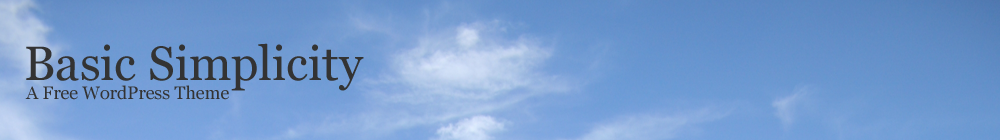
<style>
.page{position:relative;width:1000px;height:140px}
.page>*{position:absolute;margin:0}
.t1{font:48px "Georgia";color:#333333}
.t2{font:18px "Georgia";color:#333333}
</style>
<div class="page">
<p class="t1" style="left:26px;top:43px;width:338px;height:48px">Basic Simplicity</p>
<p class="t2" style="left:25px;top:85px;width:204px;height:15px">A Free WordPress Theme</p>
</div>
